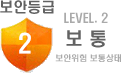
<style>
.page{position:relative;width:125px;height:75px;background:#ffffff}
.page>*{position:absolute;margin:0}
.t1{font:14px "H2hdrM";color:#626262}
.t2{font:12px "H2hdrM";color:#aaaaaa}
.t3{font:18px "H2hdrM";color:#626262}
.t4{font:8px "H2hdrM";color:#aaaaaa}
</style>
<div class="page">
<p class="t1" style="left:0px;top:0px;width:54px;height:14px">보안등급</p>
<p class="t2" style="left:64px;top:12px;width:44px;height:11px">LEVEL. 2</p>
<p class="t3" style="left:66px;top:30px;width:40px;height:18px">보 통</p>
<p class="t4" style="left:55px;top:54px;width:66px;height:8px">보안위험 보통상태</p>
</div>
